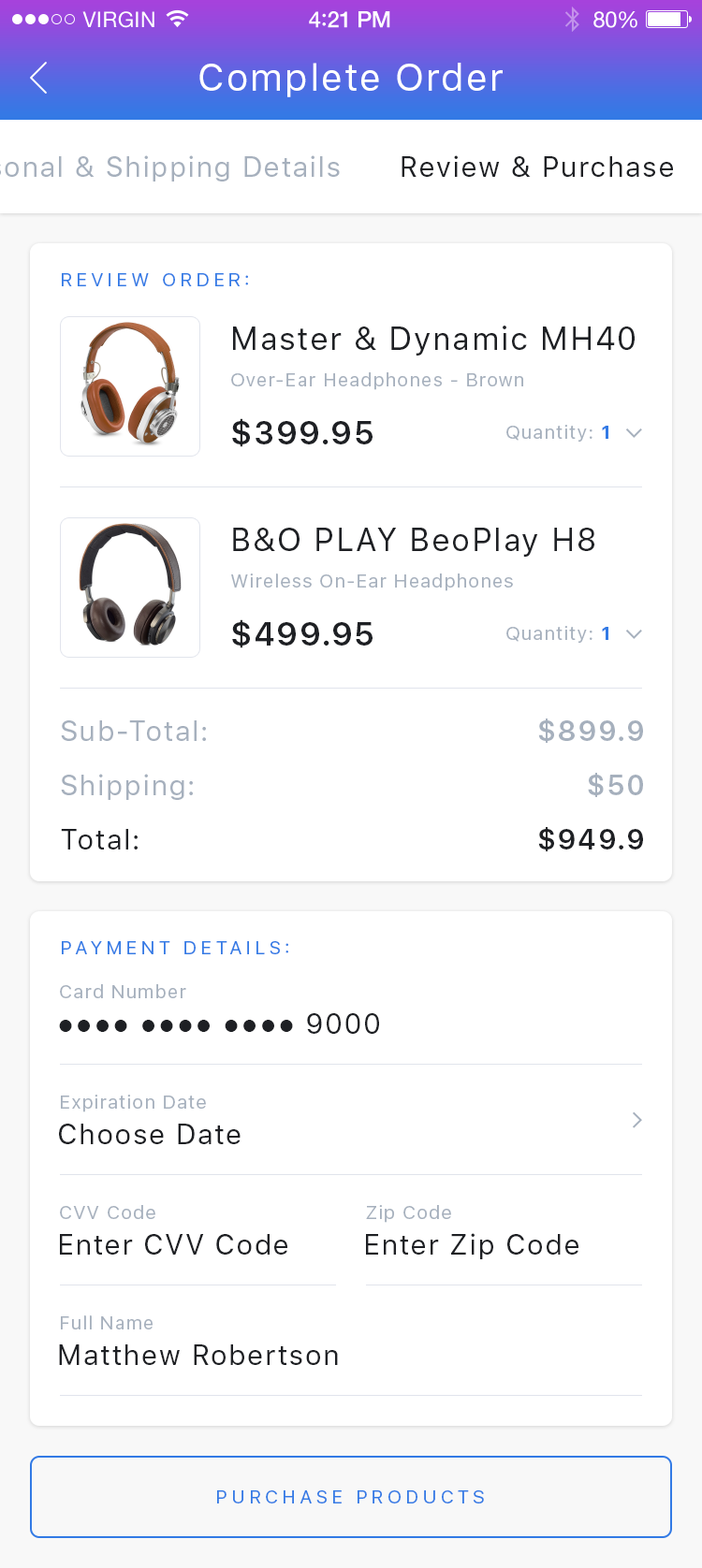
<style>
.page{position:relative;width:702px;height:1568px;background:#ffffff}
.page>*{position:absolute;margin:0}
.t1{font:37.4px "SFUIText-Regular";letter-spacing:0.05em;color:#ffffff}
.t2{font:28.1px "SFUIText-Regular";letter-spacing:0.05em;color:#1e2024}
.t3{font:18.7px "SFUIText-Regular";letter-spacing:0.2em;color:#327ae5;text-transform:uppercase}
.t4{font:31.8px "SFUIText-Regular";letter-spacing:0.05em;color:#1e2024}
.t5{font:18.7px "SFUIText-Regular";letter-spacing:0.05em;color:#a6b0bd}
.t6{font:31.8px "SFUIText-Semibold";letter-spacing:0.05em;color:#1e2024}
.t7{font:18.7px "SFUIText-Bold";letter-spacing:0.05em;color:#327ae5}
.t8{font:28.1px "SFUIText-Regular";letter-spacing:0.05em;color:#a6b0bd}
.t9{font:28.1px "SFUIText-Semibold";letter-spacing:0.05em;color:#a6b0bd}
.t10{font:28.1px "SFUIText-Semibold";letter-spacing:0.05em;color:#1e2024}
.t11{font:28.1px "Helvetica";letter-spacing:0.05em;color:#1e2024}
</style>
<div class="page">
<p class="t1" style="left:199px;top:63px;width:303px;height:34px">Complete Order</p>
<p class="t2" style="left:401px;top:155px;width:272px;height:22px">Review &amp; Purchase</p>
<p class="t3" style="left:62px;top:273px;width:186px;height:13px">review order:</p>
<p class="t4" style="left:233px;top:326px;width:401px;height:30px">Master &amp; Dynamic MH40</p>
<p class="t5" style="left:231px;top:372px;width:292px;height:18px">Over-Ear Headphones - Brown</p>
<p class="t6" style="left:232px;top:418px;width:140px;height:29px">$399.95</p>
<p class="t5" style="left:506px;top:425px;width:102px;height:17px">Quantity: <span class="t7">1</span></p>
<p class="t4" style="left:233px;top:528px;width:361px;height:29px">B&amp;O PLAY BeoPlay H8</p>
<p class="t5" style="left:231px;top:573px;width:282px;height:18px">Wireless On-Ear Headphones</p>
<p class="t6" style="left:232px;top:619px;width:140px;height:29px">$499.95</p>
<p class="t5" style="left:506px;top:626px;width:102px;height:17px">Quantity: <span class="t7">1</span></p>
<p class="t8" style="left:61px;top:720px;width:145px;height:21px">Sub-Total:</p>
<p class="t9" style="left:538px;top:719px;width:105px;height:24px">$899.9</p>
<p class="t8" style="left:61px;top:774px;width:132px;height:26px">Shipping:</p>
<p class="t9" style="left:588px;top:773px;width:55px;height:24px">$50</p>
<p class="t2" style="left:61px;top:829px;width:77px;height:20px">Total:</p>
<p class="t10" style="left:538px;top:827px;width:105px;height:24px">$949.9</p>
<p class="t3" style="left:62px;top:941px;width:226px;height:13px">Payment details:</p>
<p class="t5" style="left:60px;top:984px;width:126px;height:14px">Card Number</p>
<p class="t11" style="left:59px;top:1013px;width:320px;height:21px">●●●● ●●●● ●●●●<span class="t2"> 9000</span></p>
<p class="t5" style="left:61px;top:1095px;width:145px;height:17px">Expiration Date</p>
<p class="t2" style="left:59px;top:1124px;width:181px;height:20px">Choose Date</p>
<p class="t5" style="left:60px;top:1205px;width:95px;height:14px">CVV Code</p>
<p class="t5" style="left:366px;top:1205px;width:85px;height:18px">Zip Code</p>
<p class="t2" style="left:60px;top:1234px;width:227px;height:21px">Enter CVV Code</p>
<p class="t2" style="left:366px;top:1233px;width:212px;height:26px">Enter Zip Code</p>
<p class="t5" style="left:61px;top:1315px;width:91px;height:14px">Full Name</p>
<p class="t2" style="left:59px;top:1344px;width:279px;height:21px">Matthew Robertson</p>
<p class="t3" style="left:217px;top:1490px;width:267px;height:13px">purchase products</p>
</div>
